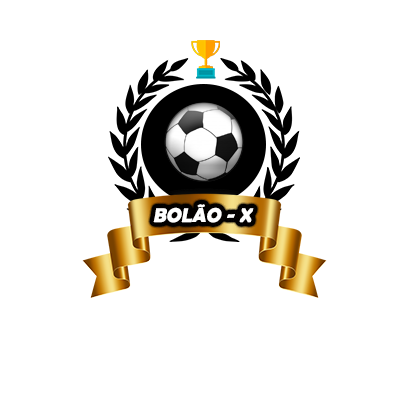
<style>
.page{position:relative;width:400px;height:400px;background:#ffffff}
.page>*{position:absolute;margin:0}
.t1{font:20px "BerlinSansFBDemi-Bold";color:#ffffff;font-style:italic}
</style>
<div class="page">
<p class="t1" style="left:153px;top:204px;width:101px;height:19px">BOLÃO - X</p>
</div>
